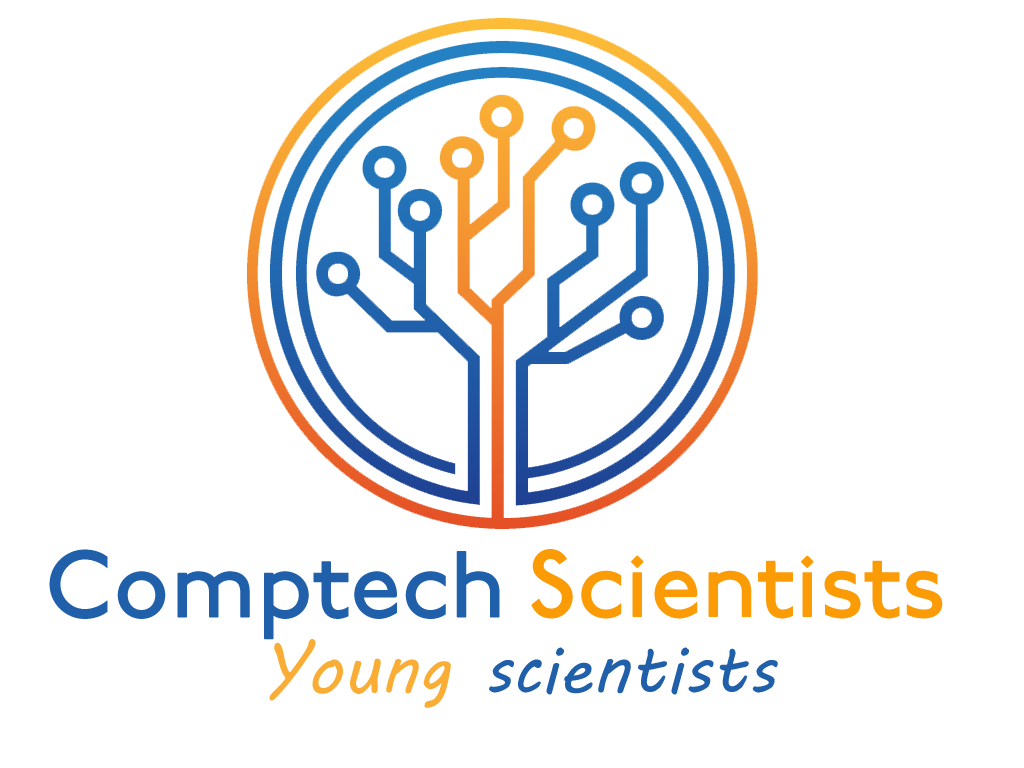
<style>
.page{position:relative;width:1024px;height:768px;background:#ffffff}
.page>*{position:absolute;margin:0}
.t1{font:95px "P22Underground-Medium";color:#2060aa}
.t2{font:95px "P22Underground-Medium";color:#fb9c07}
.t3{font:68.3px "MVBoli";color:#2060aa}
.t4{font:68.3px "MVBoli";color:#f9ad35}
</style>
<div class="page">
<p class="t1" style="left:49px;top:549px;width:451px;height:91px">Comptech</p>
<p class="t2" style="left:531px;top:549px;width:412px;height:70px">Scientists</p>
<p class="t3" style="left:269px;top:639px;width:509px;height:69px"><span class="t4">Young</span> scientists</p>
</div>
